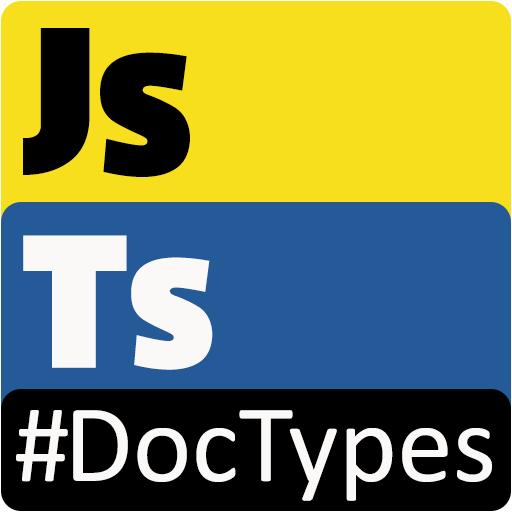
<style>
.page{position:relative;width:512px;height:512px;background:#f7df1e}
.page>*{position:absolute;margin:0}
.t1{font:208px "Kenaar-Regular";color:#000000}
.t2{font:170.5px "Kenaar-Regular";color:#000000}
.t3{font:187.3px "Kenaar-Regular";color:#faf9f8}
.t4{font:153.5px "Kenaar-Regular";color:#faf9f8}
.t5{font:111.6px "Calibri";color:#faf9f8}
.t6{font:111.6px "Calibri";letter-spacing:-0.05em;color:#faf9f8}
</style>
<div class="page">
<p class="t1" style="left:23px;top:28px;width:167px;height:149px">J<span class="t2">S</span></p>
<p class="t3" style="left:23px;top:235px;width:190px;height:135px">T<span class="t4">S</span></p>
<p class="t5" style="left:16px;top:410px;width:476px;height:91px"><span class="t6">#</span>DocTypes</p>
</div>
